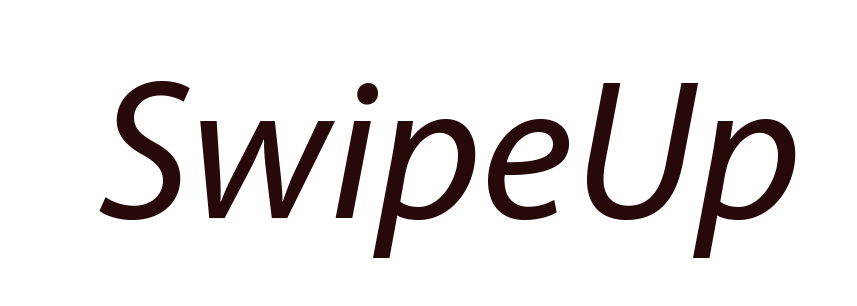
<style>
.page{position:relative;width:857px;height:306px;background:#ffffff}
.page>*{position:absolute;margin:0}
.t1{font:200px "MyriadPro-It";color:#270909}
</style>
<div class="page">
<p class="t1" style="left:99px;top:80px;width:697px;height:178px">SwipeUp</p>
</div>
